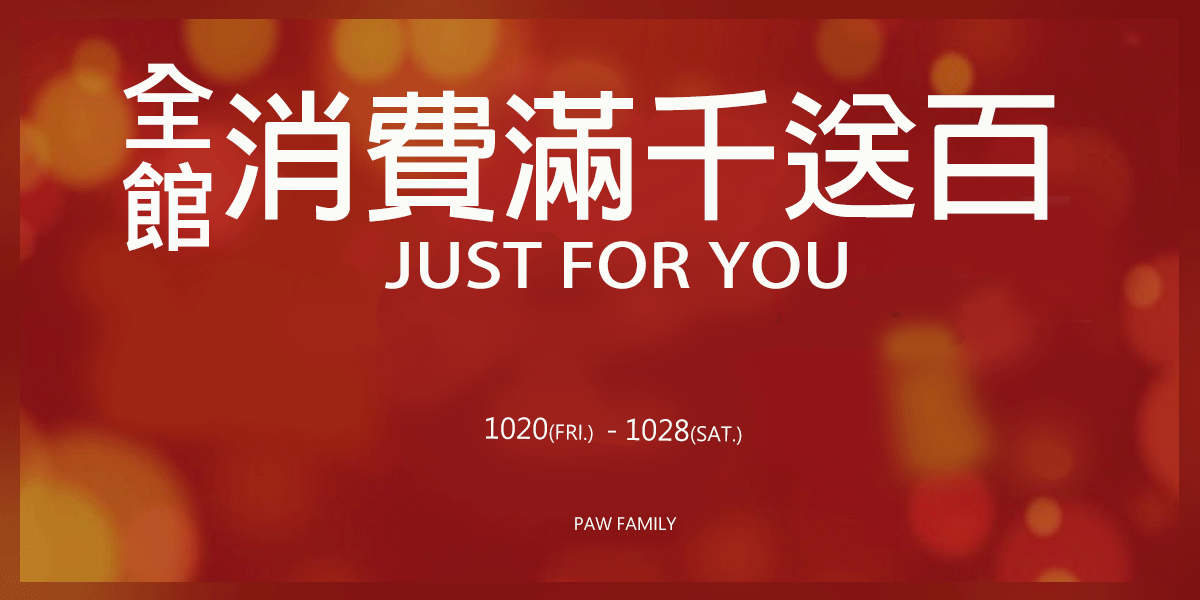
<style>
.page{position:relative;width:1200px;height:600px}
.page>*{position:absolute;margin:0}
.t1{font:100.8px/14px "MicrosoftJhengHeiBold";color:#fbfbf9}
.t2{font:140px "AdobeFanHeitiStd-Bold";color:#fbfbf8}
.t3{font:60px "AdobeFanHeitiStd-Bold";color:#fbfbf8;scale:1.2 1}
.t4{font:19.6px "MicrosoftJhengHeiRegular";color:#fbfbf8}
.t5{font:28px "MicrosoftJhengHeiRegular";color:#fbfbf8}
.t6{font:16.8px "MicrosoftJhengHeiRegular";color:#fbfbf8}
</style>
<div class="page">
<p class="t1" style="left:123px;top:63px;width:90px;height:188px;text-align:center">全館</p>
<p class="t2" style="left:225px;top:90px;width:830px;height:132px">消費滿千送百</p>
<p class="t3" style="left:385px;top:241px;width:462px;height:48px">JUST FOR YOU</p>
<p class="t4" style="left:486px;top:417px;width:256px;height:28px;rotate:1deg"><span class="t5">1020</span>(FRI.) <span class="t5"> - 1028</span>(SAT.)</p>
<p class="t6" style="left:575px;top:517px;width:102px;height:13px">PAW FAMILY</p>
</div>
